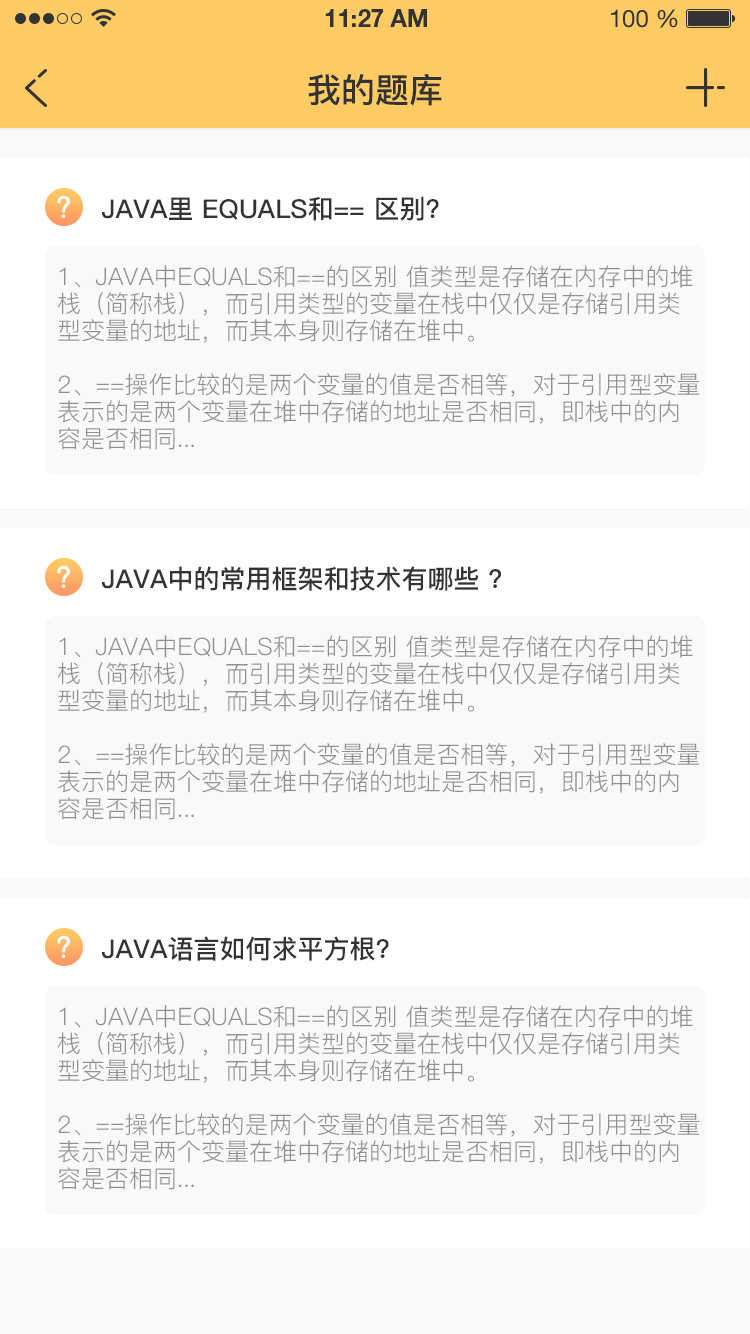
<style>
.page{position:relative;width:750px;height:1334px;background:#f9f9f9}
.page>*{position:absolute;margin:0}
.t1{font:34px "PingFang-SC-Bold";color:#333333;text-transform:uppercase}
.t2{font:26px "PingFang-SC-Bold";color:#333333;text-transform:uppercase}
.t3{font:24px/27px "PingFang-SC-Regular";color:#909090;text-transform:uppercase}
</style>
<div class="page">
<p class="t1" style="left:308px;top:74px;width:134px;height:32px">我的题库</p>
<p class="t2" style="left:102px;top:196px;width:337px;height:25px">java里 equals和== 区别?</p>
<p class="t3" style="left:58px;top:265px;width:642px;height:185px">1、java中equals和==的区别 值类型是存储在内存中的堆栈（简称栈），而引用类型的变量在栈中仅仅是存储引用类型变量的地址，而其本身则存储在堆中。<br><br>2、==操作比较的是两个变量的值是否相等，对于引用型变量表示的是两个变量在堆中存储的地址是否相同，即栈中的内容是否相同...</p>
<p class="t2" style="left:102px;top:566px;width:399px;height:25px">Java中的常用框架和技术有哪些 ?</p>
<p class="t3" style="left:58px;top:635px;width:642px;height:185px">1、java中equals和==的区别 值类型是存储在内存中的堆栈（简称栈），而引用类型的变量在栈中仅仅是存储引用类型变量的地址，而其本身则存储在堆中。<br><br>2、==操作比较的是两个变量的值是否相等，对于引用型变量表示的是两个变量在堆中存储的地址是否相同，即栈中的内容是否相同...</p>
<p class="t2" style="left:102px;top:936px;width:287px;height:25px">java语言如何求平方根?</p>
<p class="t3" style="left:58px;top:1005px;width:642px;height:185px">1、java中equals和==的区别 值类型是存储在内存中的堆栈（简称栈），而引用类型的变量在栈中仅仅是存储引用类型变量的地址，而其本身则存储在堆中。<br><br>2、==操作比较的是两个变量的值是否相等，对于引用型变量表示的是两个变量在堆中存储的地址是否相同，即栈中的内容是否相同...</p>
</div>
